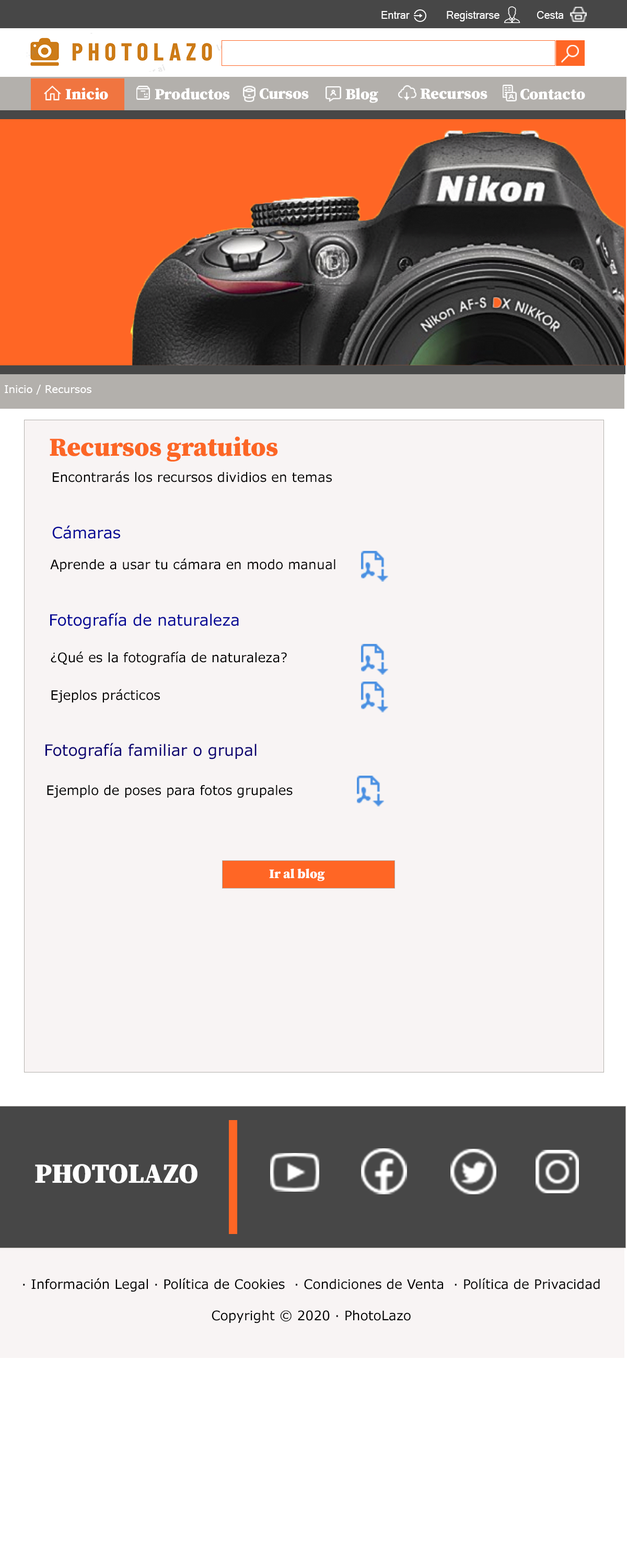
<style>
.page{position:relative;width:627px;height:1568px;background:#f8f4f4}
.page>*{position:absolute;margin:0}
.t1{font:10.5px "MicrosoftSansSerif";color:#ffffff}
.t2{font:15.7px "SourceSerifRoman-Black";color:#ffffff}
.t3{font:3.1px "SourceSerifRoman-Black";color:#ffffff}
.t4{font:10.5px "MSReferenceSansSerif";color:#ffffff}
.t5{font:26.1px "SourceSerifRoman-Black";color:#fc6625}
.t6{font:13.1px "MSReferenceSansSerif";color:#010000}
.t7{font:15.7px "MSReferenceSansSerif";color:#010495}
.t8{font:15.7px "MSReferenceSansSerif";color:#0b0071}
.t9{font:13.1px "SourceSerifRoman-Black";color:#fefefe}
.t10{font:27.9px "SourceSerifRoman-Black";color:#fefefe}
.t11{font:13.1px "MSReferenceSansSerif";color:#000000}
</style>
<div class="page">
<p class="t1" style="left:382px;top:11px;width:28px;height:8px">Entrar</p>
<p class="t1" style="left:447px;top:11px;width:53px;height:10px">Registrarse</p>
<p class="t1" style="left:537px;top:11px;width:26px;height:8px">Cesta</p>
<p class="t2" style="left:65px;top:88px;width:43px;height:12px"><span class="t3"><br></span>Inicio</p>
<p class="t2" style="left:155px;top:88px;width:75px;height:12px">Productos</p>
<p class="t2" style="left:259px;top:88px;width:50px;height:11px">Cursos</p>
<p class="t2" style="left:345px;top:88px;width:33px;height:15px">Blog</p>
<p class="t2" style="left:420px;top:88px;width:68px;height:11px">Recursos</p>
<p class="t2" style="left:520px;top:88px;width:65px;height:12px">Contacto</p>
<p class="t4" style="left:5px;top:385px;width:86px;height:10px">Inicio / Recursos</p>
<p class="t5" style="left:50px;top:436px;width:228px;height:26px">Recursos gratuitos</p>
<p class="t6" style="left:53px;top:471px;width:279px;height:11px">Encontrarás los recursos dividios en temas</p>
<p class="t7" style="left:52px;top:525px;width:68px;height:14px">Cámaras</p>
<p class="t6" style="left:50px;top:558px;width:286px;height:14px">Aprende a usar tu cámara en modo manual</p>
<p class="t7" style="left:50px;top:613px;width:189px;height:16px">Fotografía de naturaleza</p>
<p class="t6" style="left:51px;top:651px;width:236px;height:14px">¿Qué es la fotografía de naturaleza?</p>
<p class="t6" style="left:51px;top:689px;width:109px;height:14px">Ejeplos prácticos</p>
<p class="t8" style="left:45px;top:743px;width:212px;height:16px">Fotografía familiar o grupal</p>
<p class="t6" style="left:47px;top:785px;width:246px;height:13px">Ejemplo de poses para fotos grupales</p>
<p class="t9" style="left:269px;top:869px;width:56px;height:12px">Ir al blog</p>
<p class="t10" style="left:35px;top:1164px;width:163px;height:19px">PHOTOLAZO</p>
<p class="t11" style="left:23px;top:1278px;width:577px;height:45px;text-align:center"><span class="t9"><br></span><br>· Información Legal · Política de Cookies  · Condiciones de Venta  · Política de Privacidad  <br><br>Copyright © 2020 · PhotoLazo</p>
</div>
